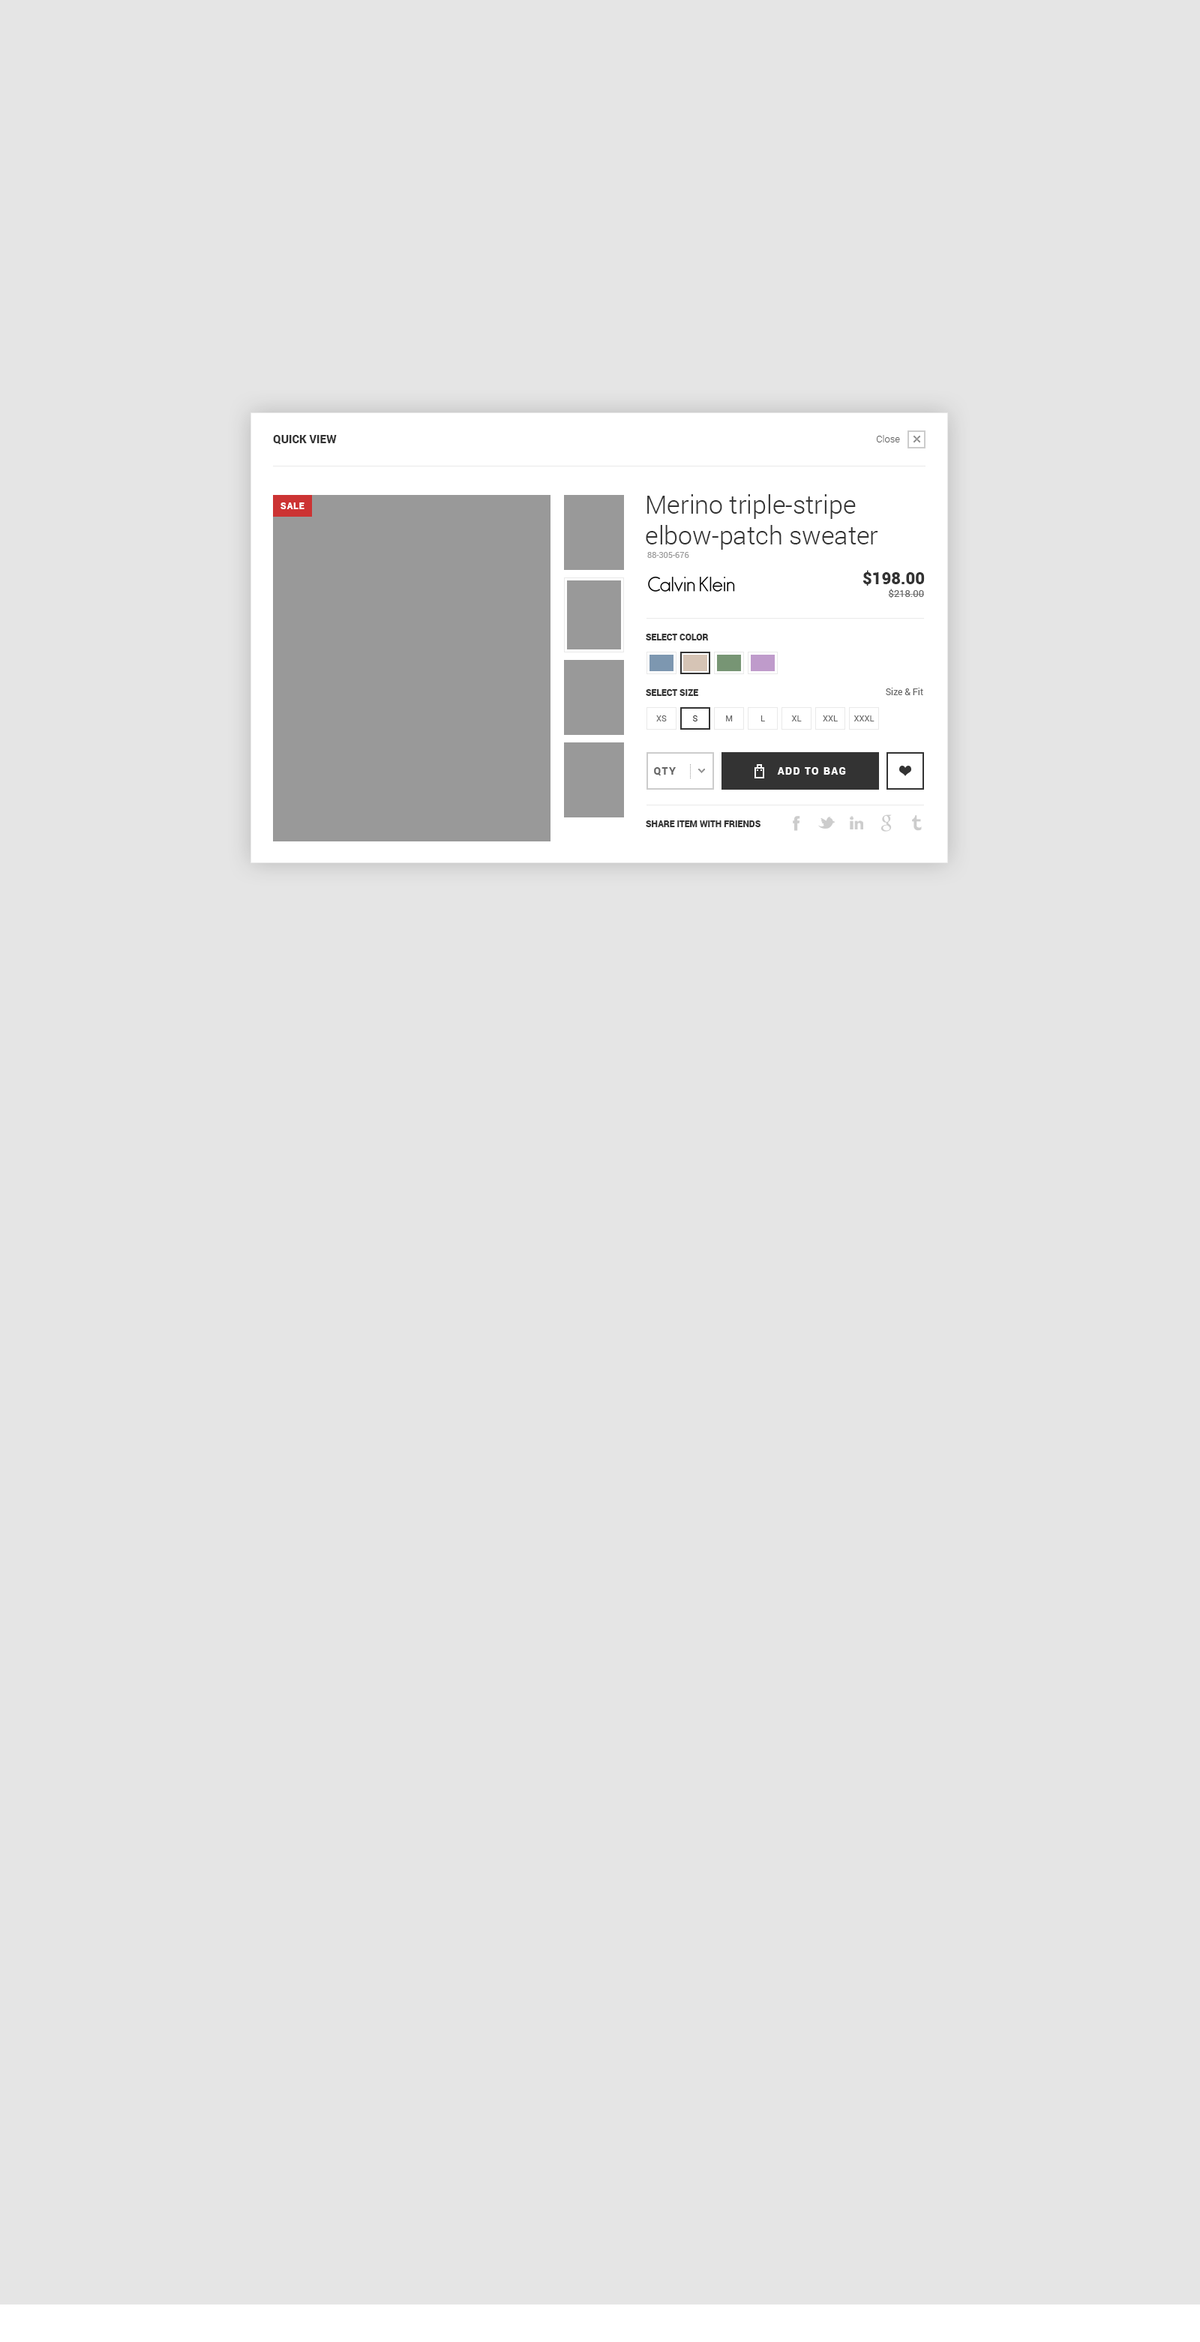
<style>
.page{position:relative;width:1200px;height:2342px;background:#e5e5e5}
.page>*{position:absolute;margin:0}
.t1{font:11.2px "Roboto-Black";color:#333333;text-transform:uppercase}
.t2{font:9.8px "Roboto-Light";color:#666666}
.t3{font:25.5px "Roboto-Light";color:#333333}
.t4{font:9px "Roboto-Black";letter-spacing:0.08em;color:#ffffff;text-transform:uppercase}
.t5{font:8.2px "Roboto-Regular";color:#999999}
.t6{font:16.5px "Roboto-Black";color:#333333}
.t7{font:9.8px "Roboto-Regular";color:#666666}
.t8{font:9px "Roboto-Black";color:#333333;text-transform:uppercase}
.t9{font:9px "Roboto-Regular";color:#666666}
.t10{font:8.2px "Roboto-Regular";color:#666666;text-transform:uppercase}
.t11{font:8.2px "Roboto-Regular";color:#333333;text-transform:uppercase}
.t12{font:10.5px "Roboto-Black";letter-spacing:0.1em;color:#666666;text-transform:uppercase}
.t13{font:10.5px "Roboto-Black";letter-spacing:0.1em;color:#ffffff;text-transform:uppercase}
</style>
<div class="page">
<p class="t1" style="left:273px;top:435px;width:64px;height:10px">QUICK VIEW</p>
<p class="t2" style="left:877px;top:435px;width:23px;height:7px">Close</p>
<p class="t3" style="left:646px;top:494px;width:232px;height:56px">Merino triple-stripe elbow-patch sweater</p>
<p class="t4" style="left:280px;top:502px;width:24px;height:7px">SALE</p>
<p class="t5" style="left:647px;top:552px;width:42px;height:6px">88-305-676</p>
<p class="t6" style="left:863px;top:570px;width:62px;height:16px">$198.00</p>
<p class="t7" style="left:888px;top:589px;width:36px;height:9px">$218.00</p>
<p class="t8" style="left:646px;top:634px;width:63px;height:6px">Select color</p>
<p class="t8" style="left:646px;top:689px;width:52px;height:7px">Select SIZE</p>
<p class="t9" style="left:886px;top:688px;width:37px;height:7px">Size &amp; Fit</p>
<p class="t10" style="left:656px;top:716px;width:11px;height:6px">XS</p>
<p class="t11" style="left:692px;top:716px;width:6px;height:6px">s</p>
<p class="t10" style="left:726px;top:716px;width:7px;height:6px">m</p>
<p class="t10" style="left:760px;top:716px;width:5px;height:6px">L</p>
<p class="t10" style="left:791px;top:716px;width:11px;height:6px">XL</p>
<p class="t10" style="left:823px;top:716px;width:15px;height:6px">XXL</p>
<p class="t10" style="left:854px;top:716px;width:20px;height:6px">XXXL</p>
<p class="t12" style="left:654px;top:767px;width:22px;height:9px">QTY</p>
<p class="t13" style="left:777px;top:767px;width:69px;height:8px">ADD TO BAG</p>
<p class="t8" style="left:646px;top:820px;width:114px;height:7px">Share item with friends</p>
</div>
